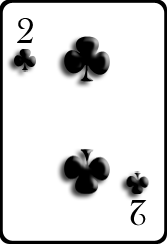
<style>
.page{position:relative;width:167px;height:244px;background:#ffffff}
.page>*{position:absolute;margin:0}
.t1{font:37px "BaskOldFace";color:#000000}
</style>
<div class="page">
<p class="t1" style="left:17px;top:18px;width:16px;height:25px">2</p>
<p class="t1" style="left:130px;top:200px;width:17px;height:26px;rotate:-180deg">2</p>
</div>
